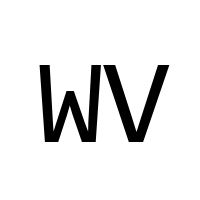
<style>
.page{position:relative;width:200px;height:200px;background:#ffffff}
.page>*{position:absolute;margin:0}
.t1{font:120.8px "Consolas";color:#000000}
</style>
<div class="page">
<p class="t1" style="left:39px;top:65px;width:131px;height:77px">WV</p>
</div>
